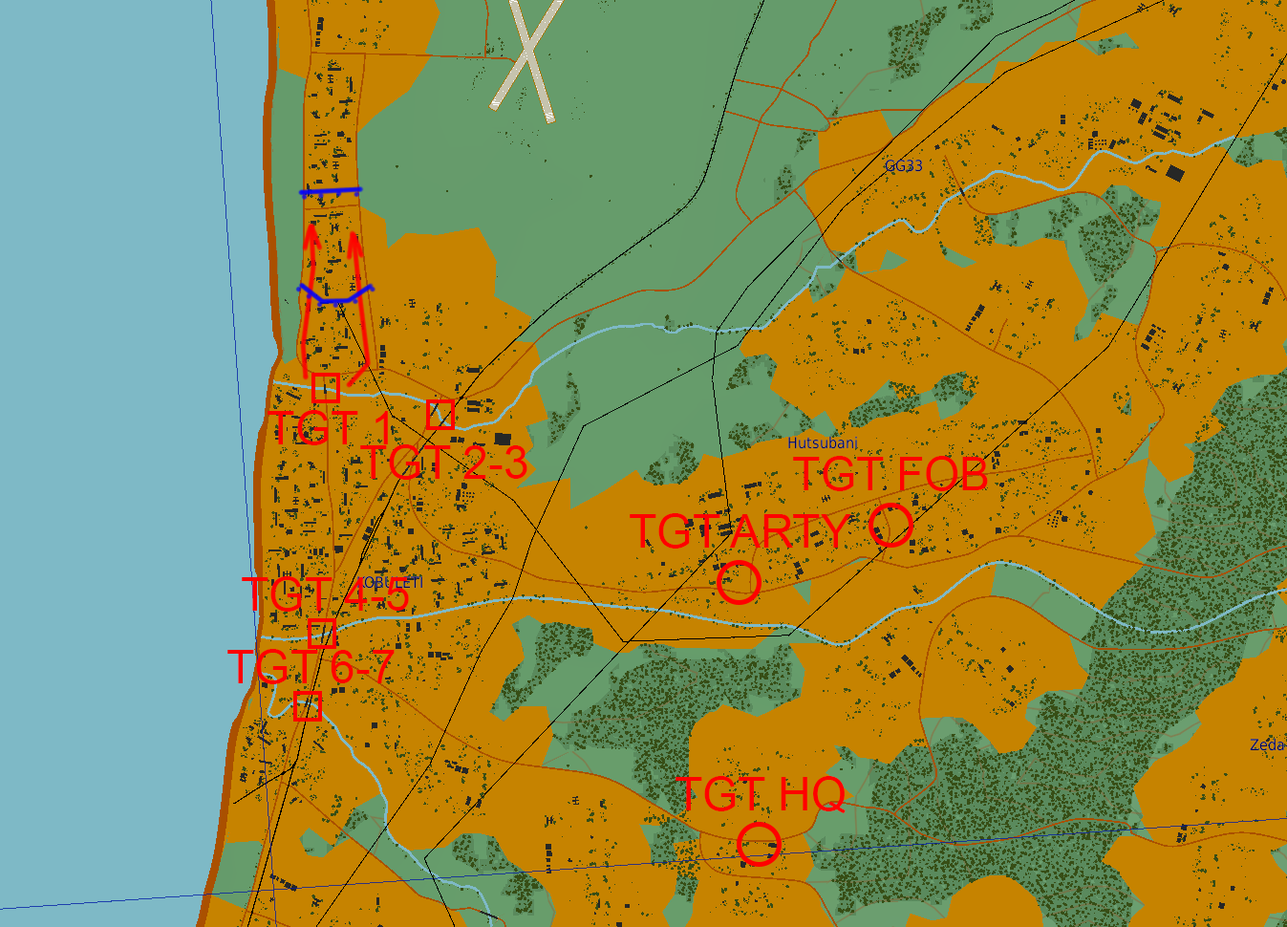
<style>
.page{position:relative;width:1287px;height:927px;background:#c68300}
.page>*{position:absolute;margin:0}
.t1{font:45.9px "ArialMT";color:#ff0000}
</style>
<div class="page">
<p class="t1" style="left:267px;top:410px;width:121px;height:35px">TGT 1</p>
<p class="t1" style="left:360px;top:444px;width:167px;height:36px">TGT 2-3</p>
<p class="t1" style="left:793px;top:456px;width:195px;height:35px">TGT FOB</p>
<p class="t1" style="left:630px;top:513px;width:221px;height:35px">TGT ARTY</p>
<p class="t1" style="left:242px;top:576px;width:167px;height:35px">TGT 4-5</p>
<p class="t1" style="left:227px;top:649px;width:168px;height:35px">TGT 6-7</p>
<p class="t1" style="left:675px;top:776px;width:170px;height:37px">TGT HQ</p>
</div>
